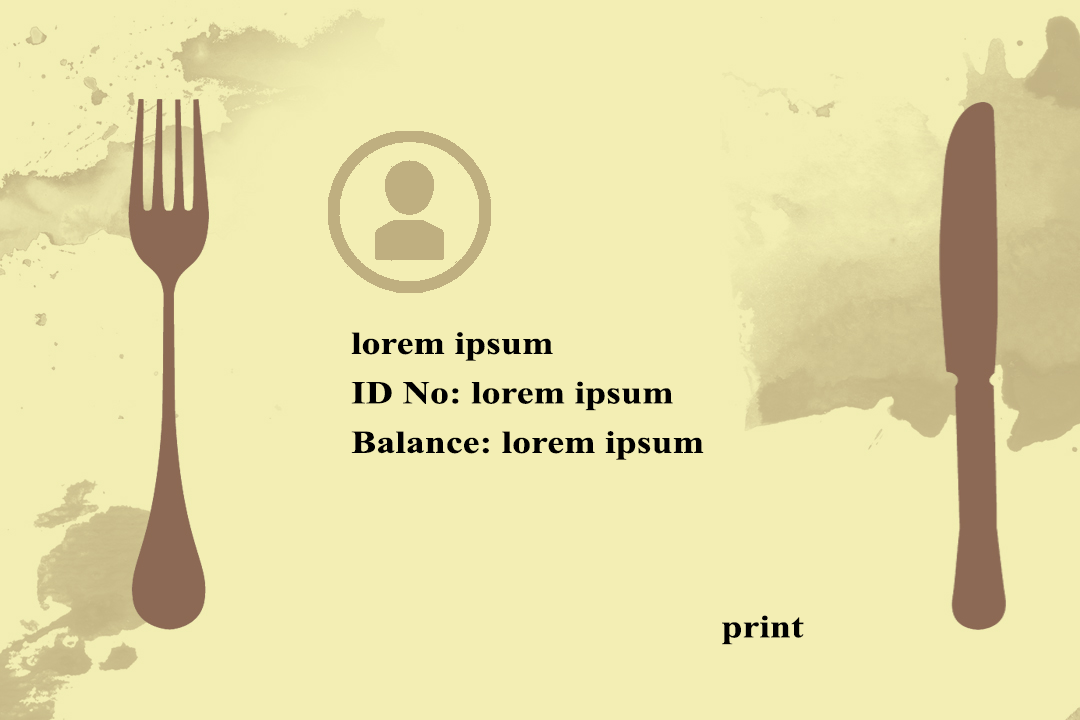
<style>
.page{position:relative;width:1080px;height:720px;background:#f3eeb4}
.page>*{position:absolute;margin:0}
.t1{font:32.1px "TimesNewRomanPS-BoldMT";color:#000000;scale:1.18 1}
</style>
<div class="page">
<p class="t1" style="left:351px;top:332px;width:202px;height:29px">lorem ipsum</p>
<p class="t1" style="left:351px;top:381px;width:322px;height:30px">ID No: lorem ipsum</p>
<p class="t1" style="left:351px;top:431px;width:353px;height:29px">Balance: lorem ipsum</p>
<p class="t1" style="left:722px;top:615px;width:82px;height:30px">print</p>
</div>
